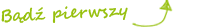
<style>
.page{position:relative;width:200px;height:27px;background:#ffffff}
.page>*{position:absolute;margin:0}
.t1{font:16.7px "SegoeScript-Bold";color:#97c00e;scale:0.97 1}
</style>
<div class="page">
<p class="t1" style="left:1px;top:6px;width:127px;height:17px;rotate:-3deg">Bądź pierwszy</p>
</div>
